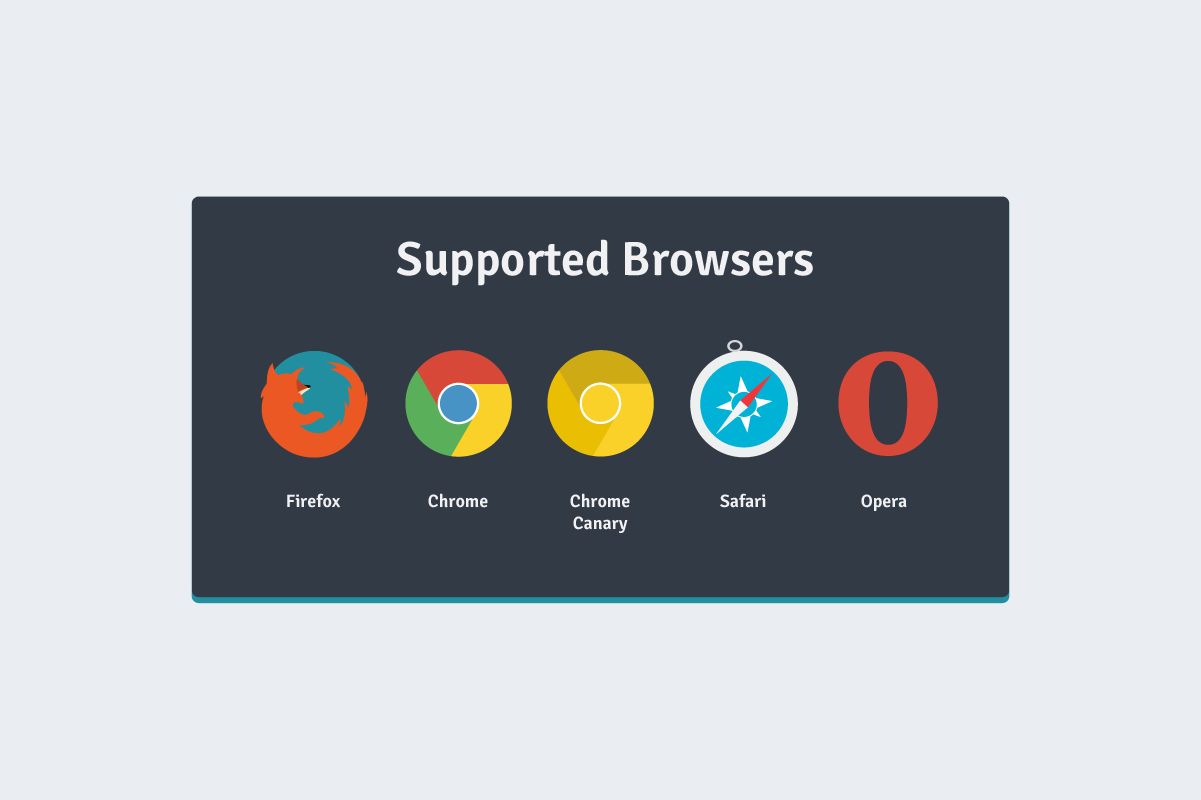
<style>
.page{position:relative;width:1201px;height:800px;background:#eaedf1}
.page>*{position:absolute;margin:0}
.t1{font:48px "Signika-Semibold";color:#f1f1f3}
.t2{font:18px "Signika-Semibold";color:#f1f1f3}
</style>
<div class="page">
<p class="t1" style="left:397px;top:239px;width:416px;height:47px">Supported Browsers</p>
<p class="t2" style="left:287px;top:493px;width:54px;height:15px">Firefox</p>
<p class="t2" style="left:428px;top:493px;width:60px;height:15px">Chrome</p>
<p class="t2" style="left:570px;top:493px;width:60px;height:40px;text-align:center">Chrome<br>Canary</p>
<p class="t2" style="left:720px;top:493px;width:46px;height:15px">Safari</p>
<p class="t2" style="left:861px;top:494px;width:46px;height:17px">Opera</p>
</div>
